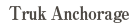
<style>
.page{position:relative;width:136px;height:27px;background:#ffffff}
.page>*{position:absolute;margin:0}
.t1{font:18px "RyuminPro-ExBold";letter-spacing:-0.04em;color:#4c4843;scale:0.9 1}
</style>
<div class="page">
<p class="t1" style="left:9px;top:6px;width:120px;height:17px">Truk Anchorage</p>
</div>
